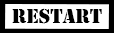
<style>
.page{position:relative;width:114px;height:33px;background:#000000}
.page>*{position:absolute;margin:0}
.t1{font:20.7px "Stencil";color:#000000}
</style>
<div class="page">
<p class="t1" style="left:12px;top:8px;width:90px;height:16px">RESTART</p>
</div>
